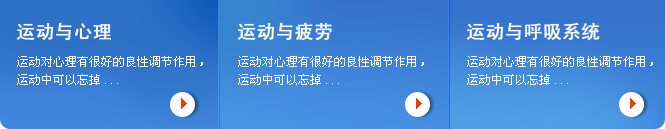
<style>
.page{position:relative;width:665px;height:129px}
.page>*{position:absolute;margin:0}
.t1{font:18.7px "SimHei";color:#ffffff;font-weight:bold}
.t2{font:12px/18.7px "SimSun";color:#ffffff}
</style>
<div class="page">
<p class="t1" style="left:16px;top:22px;width:96px;height:19px">运动与心理</p>
<p class="t1" style="left:237px;top:22px;width:95px;height:19px">运动与疲劳</p>
<p class="t1" style="left:466px;top:22px;width:134px;height:19px">运动与呼吸系统</p>
<p class="t2" style="left:17px;top:56px;width:186px;height:29px">运动对心理有很好的良性调节作用，运动中可以忘掉...</p>
<p class="t2" style="left:238px;top:56px;width:186px;height:29px">运动对心理有很好的良性调节作用，运动中可以忘掉...</p>
<p class="t2" style="left:467px;top:56px;width:186px;height:29px">运动对心理有很好的良性调节作用，运动中可以忘掉...</p>
</div>
